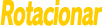
<style>
.page{position:relative;width:102px;height:26px;background:#ffffff}
.page>*{position:absolute;margin:0}
.t1{font:32px "RodinPro-EB";letter-spacing:-0.054em;color:#fecd00;font-style:italic;scale:0.61 1}
</style>
<div class="page">
<p class="t1" style="left:0px;top:0px;width:103px;height:26px">Rotacionar</p>
</div>
